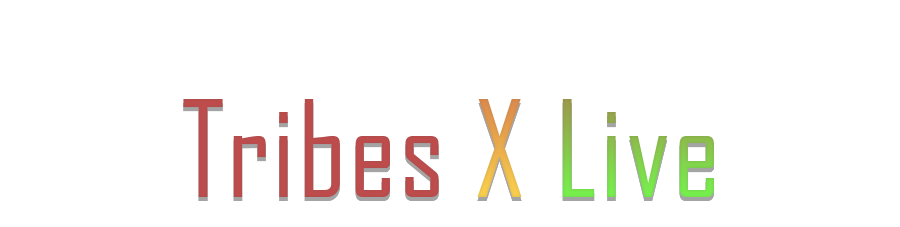
<style>
.page{position:relative;width:900px;height:227px;background:#ffffff}
.page>*{position:absolute;margin:0}
.t1{font:128px "AgencyFB-Reg";letter-spacing:0.02em}
</style>
<div class="page">
<p class="t1" style="left:183px;top:99px;width:531px;height:98px">Tribes X Live</p>
</div>
